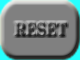
<style>
.page{position:relative;width:80px;height:60px;background:#808080}
.page>*{position:absolute;margin:0}
.t1{font:18px "MyungjoXB-HM"}
</style>
<div class="page">
<p class="t1" style="left:14px;top:22px;width:53px;height:14px">RESET</p>
</div>
